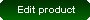
<style>
.page{position:relative;width:90px;height:20px}
.page>*{position:absolute;margin:0}
.t1{font:10px "Arial-BoldMT";color:#ffffff}
</style>
<div class="page">
<p class="t1" style="left:18px;top:6px;width:57px;height:9px">Edit product</p>
</div>
